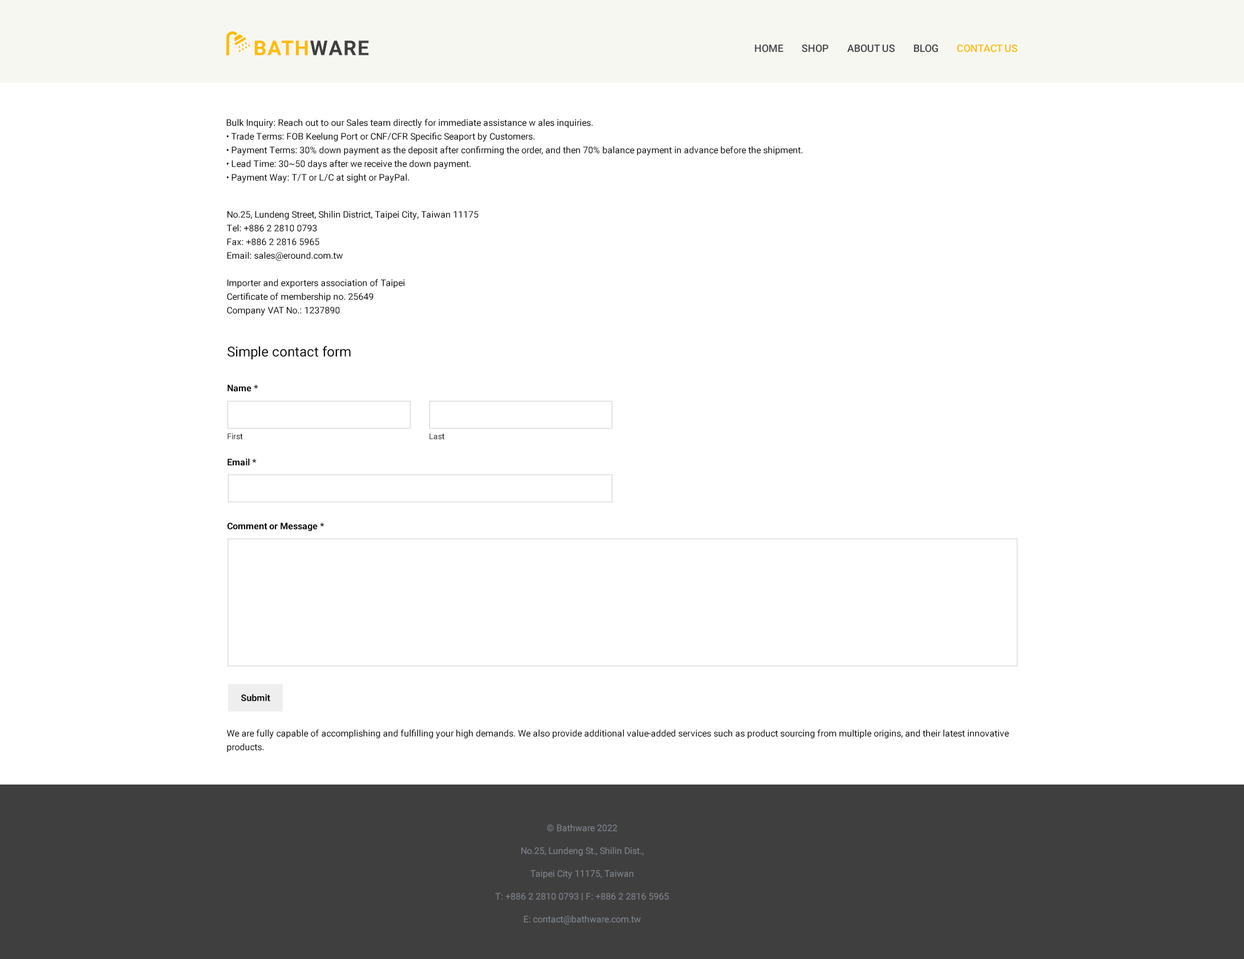
<style>
.page{position:relative;width:1244px;height:959px;background:#ffffff}
.page>*{position:absolute;margin:0}
.t1{font:20.5px "Roboto-Bold";letter-spacing:0.05em;color:#ffbb00;text-transform:uppercase}
.t2{font:20.5px "Roboto-Bold";letter-spacing:0.05em;color:#3f3f3f;text-transform:uppercase}
.t3{font:10.3px "Roboto-Medium";color:#3f3f3f;text-transform:uppercase}
.t4{font:10.3px "Roboto-Medium";color:#ffbb00;text-transform:uppercase}
.t5{font:9.1px/13.7px "Roboto-Regular";color:#030303}
.t6{font:13.7px "Roboto-Regular";color:#030303}
.t7{font:9.1px "Roboto-Bold";color:#030303}
.t8{font:8px "Roboto-Regular";color:#030303}
.t9{font:9.1px/22.8px "Roboto-Regular";color:#7f858c}
</style>
<div class="page">
<p class="t1" style="left:254px;top:40px;width:115px;height:15px">bath<span class="t2">ware</span></p>
<p class="t3" style="left:755px;top:44px;width:262px;height:8px">home        shop        about us        blog        <span class="t4">contact us</span></p>
<p class="t5" style="left:226px;top:119px;width:577px;height:64px">Bulk Inquiry: Reach out to our Sales team directly for immediate assistance w ales inquiries.<br>• Trade Terms: FOB Keelung Port or CNF/CFR Specific Seaport by Customers.<br>• Payment Terms: 30% down payment as the deposit after confirming the order, and then 70% balance payment in advance before the shipment.<br>• Lead Time: 30~50 days after we receive the down payment.<br>• Payment Way: T/T or L/C at sight or PayPal.</p>
<p class="t5" style="left:227px;top:210px;width:251px;height:106px">No.25, Lundeng Street, Shilin District, Taipei City, Taiwan 11175<br>Tel: +886 2 2810 0793<br>Fax: +886 2 2816 5965<br>Email: sales@eround.com.tw<br><br>Importer and exporters association of Taipei<br>Certificate of membership no. 25649<br>Company VAT No.: 1237890</p>
<p class="t6" style="left:227px;top:346px;width:124px;height:14px">Simple contact form</p>
<p class="t7" style="left:227px;top:384px;width:31px;height:8px">Name *</p>
<p class="t8" style="left:227px;top:433px;width:16px;height:6px">First</p>
<p class="t8" style="left:429px;top:433px;width:16px;height:6px">Last</p>
<p class="t7" style="left:227px;top:458px;width:30px;height:8px">Email *</p>
<p class="t7" style="left:227px;top:522px;width:97px;height:9px">Comment or Message *</p>
<p class="t7" style="left:241px;top:694px;width:29px;height:7px">Submit</p>
<p class="t5" style="left:227px;top:729px;width:782px;height:23px">We are fully capable of accomplishing and fulfilling your high demands. We also provide additional value-added services such as product sourcing from multiple origins, and their latest innovative products.</p>
<p class="t9" style="left:495px;top:824px;width:174px;height:101px;text-align:center">© Bathware 2022<br>No.25, Lundeng St., Shilin Dist.,<br>Taipei City 11175, Taiwan<br>T: +886 2 2810 0793 | F: +886 2 2816 5965<br>E: contact@bathware.com.tw</p>
</div>
